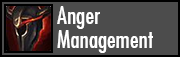
<style>
.page{position:relative;width:180px;height:57px;background:#4c4c4c}
.page>*{position:absolute;margin:0}
.t1{font:24px/24px "FuturaCondensed";color:#ffffff}
</style>
<div class="page">
<p class="t1" style="left:57px;top:6px;width:96px;height:47px;text-align:right">Anger<br>Management</p>
</div>
